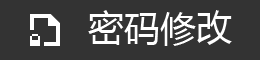
<style>
.page{position:relative;width:260px;height:60px;background:#333333}
.page>*{position:absolute;margin:0}
.t1{font:36px "MicrosoftYaHei";color:#ffffff}
</style>
<div class="page">
<p class="t1" style="left:88px;top:10px;width:144px;height:36px">密码修改</p>
</div>
